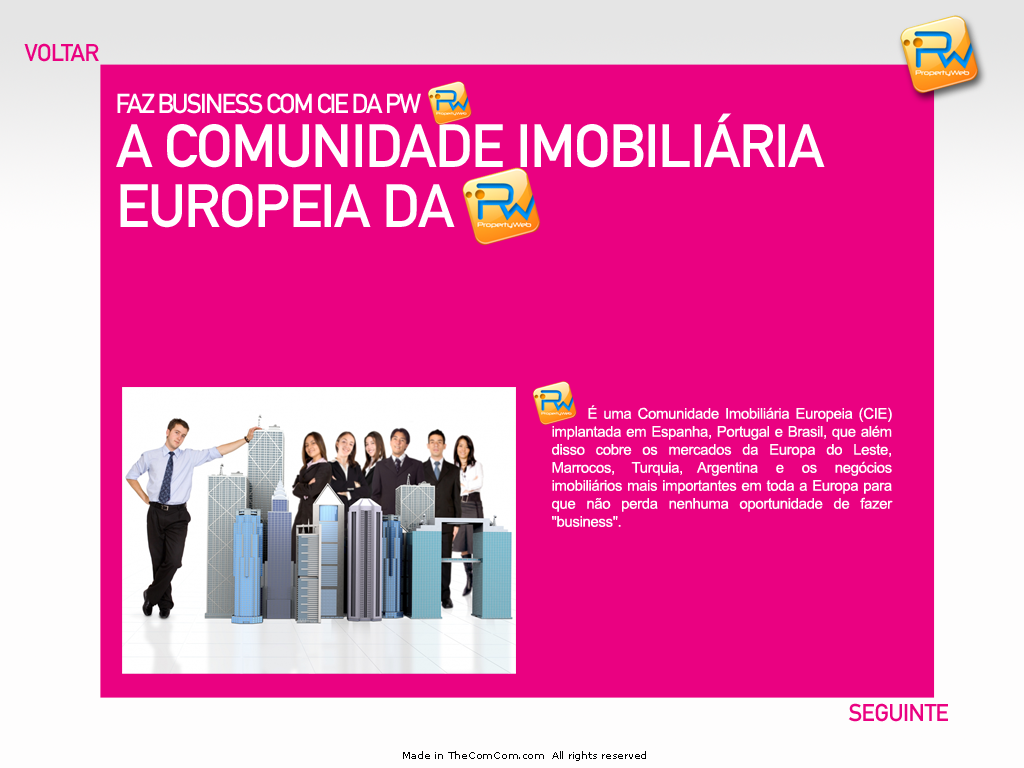
<style>
.page{position:relative;width:1024px;height:768px;background:#ea0181}
.page>*{position:absolute;margin:0}
.t1{font:24px "DINMittelschriftStd";letter-spacing:-0.025em;color:#ea0181}
.t2{font:27px "DINMittelschriftStd";letter-spacing:-0.075em;color:#ffffff;text-transform:uppercase}
.t3{font:60px/60px "DINMittelschriftStd";letter-spacing:-0.025em;color:#ffffff;text-transform:uppercase}
.t4{font:15px "ArialMT";letter-spacing:-0.025em;color:#ffffff}
.t5{font:10px "MSReferenceSansSerif";letter-spacing:-0.025em;color:#010101}
</style>
<div class="page">
<p class="t1" style="left:24px;top:43px;width:75px;height:19px">VOLTAR</p>
<p class="t2" style="left:117px;top:93px;width:304px;height:21px">FAZ BUSINESS COM CIE da PW</p>
<p class="t3" style="left:116px;top:113px;width:709px;height:115px">A COMUNIDADE IMOBILIÁRIA EUROPEIA DA</p>
<p class="t4" style="left:552px;top:405px;width:341px;height:122px;text-align:justify">É uma Comunidade Imobiliária Europeia (CIE) implantada em Espanha, Portugal e Brasil, que além disso cobre os mercados da Europa do Leste, Marrocos, Turquia, Argentina e os negócios imobiliários mais importantes em toda a Europa para que não perda nenhuma oportunidade de fazer "business".</p>
<p class="t1" style="left:848px;top:703px;width:100px;height:19px">SEGUINTE</p>
<p class="t5" style="left:403px;top:751px;width:243px;height:10px">Made in TheComCom.com  All rights reserved</p>
</div>
